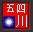
<style>
.page{position:relative;width:33px;height:32px;background:#f20000}
.page>*{position:absolute;margin:0}
.t1{font:10.4px "SimSun";color:#ffffff}
.t2{font:11.7px "SimSun";color:#ffffff}
</style>
<div class="page">
<p class="t1" style="left:7px;top:4px;width:18px;height:9px">五四</p>
<p class="t2" style="left:16px;top:15px;width:11px;height:12px">川</p>
</div>
